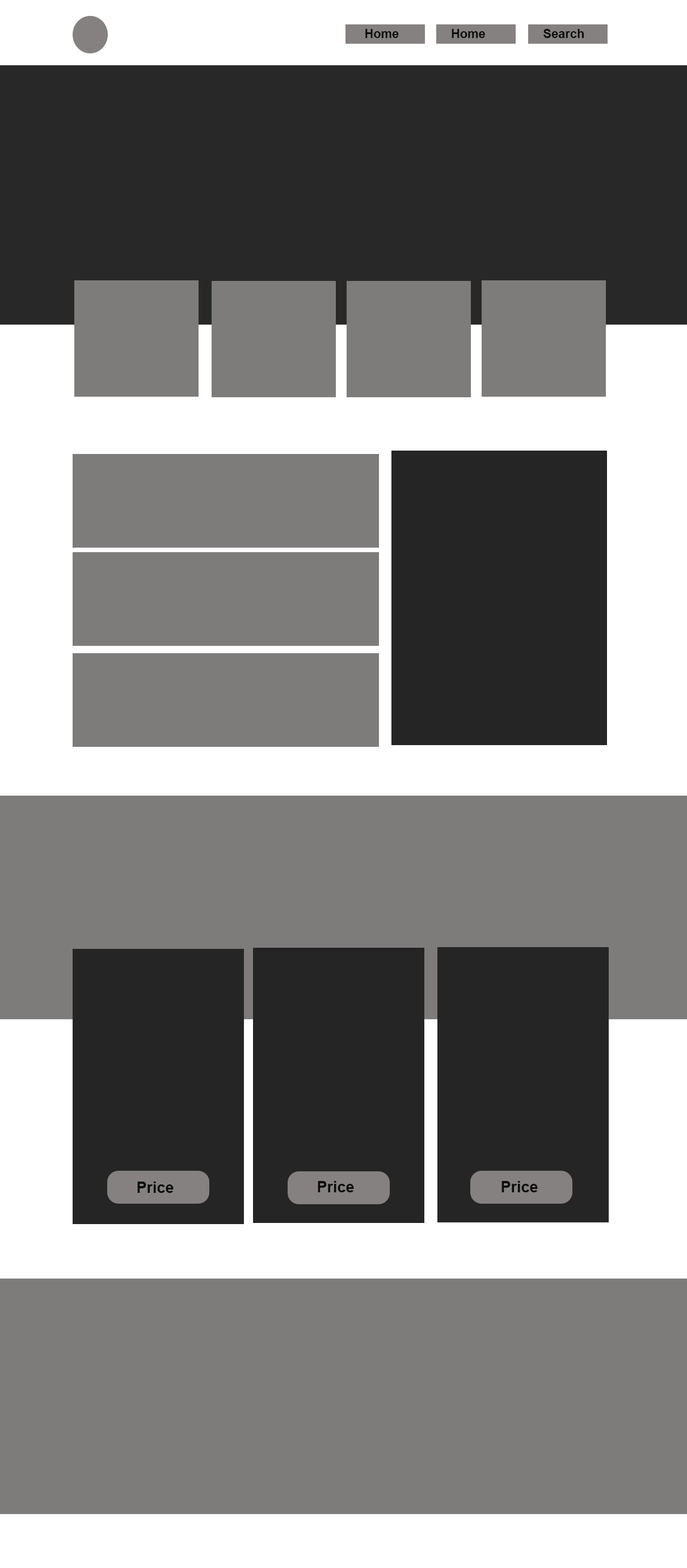
<style>
.page{position:relative;width:687px;height:1568px;background:#7e7b7b}
.page>*{position:absolute;margin:0}
.t1{font:12.4px "Arial-BoldMT";color:#0c0c0c}
.t2{font:15.3px "Arial-BoldMT";color:#0c0c0c}
</style>
<div class="page">
<p class="t1" style="left:365px;top:29px;width:34px;height:9px">Home</p>
<p class="t1" style="left:452px;top:29px;width:33px;height:9px">Home</p>
<p class="t1" style="left:544px;top:29px;width:40px;height:9px">Search</p>
<p class="t2" style="left:137px;top:1182px;width:37px;height:11px">Price</p>
<p class="t2" style="left:318px;top:1181px;width:36px;height:11px">Price</p>
<p class="t2" style="left:502px;top:1181px;width:36px;height:11px">Price</p>
</div>
